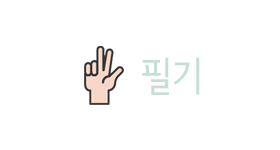
<style>
.page{position:relative;width:280px;height:150px;background:#ffffff}
.page>*{position:absolute;margin:0}
.t1{font:40px "SeN-CM";color:#c6dfd6}
</style>
<div class="page">
<p class="t1" style="left:142px;top:57px;width:58px;height:38px">필기</p>
</div>
